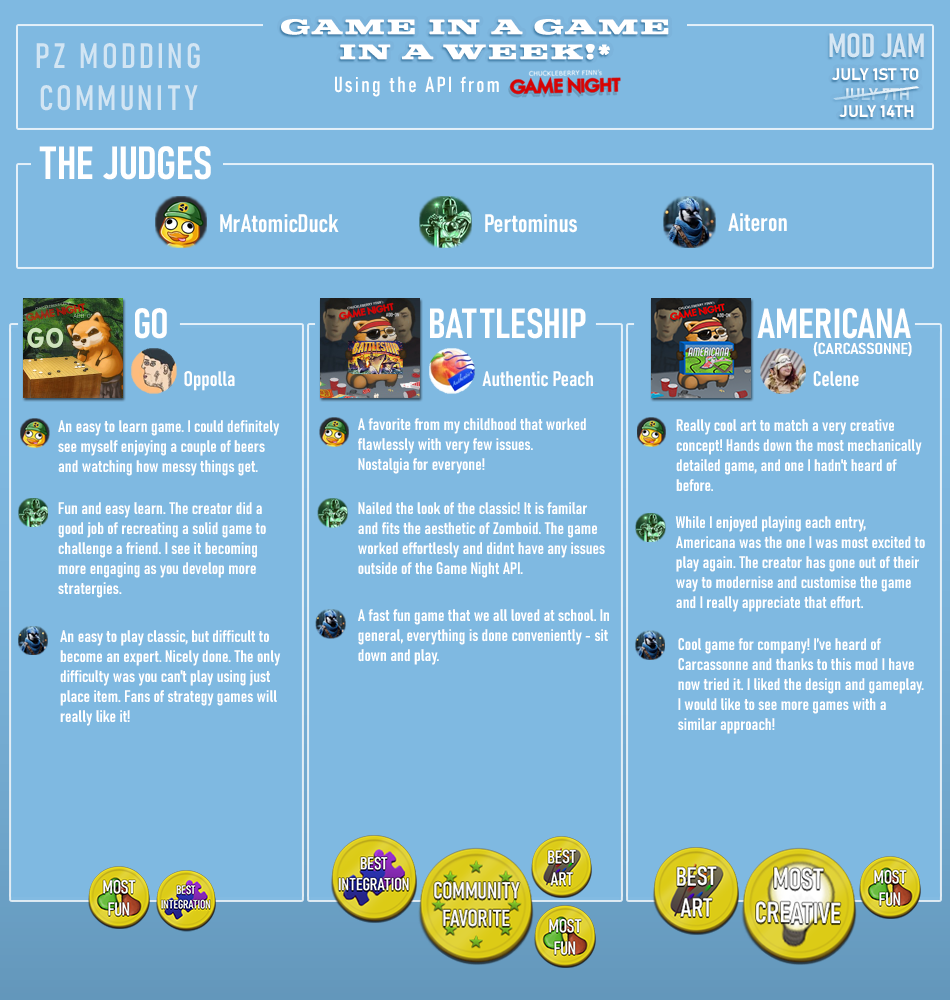
<style>
.page{position:relative;width:950px;height:1000px;background:#7fb9e1}
.page>*{position:absolute;margin:0}
.t1{font:20.8px "ColtSoft-Bold";letter-spacing:0.1em;color:#ffffff;font-weight:bold}
.t2{font:33.2px "Bahnschrift-SemiBoldCondensed";color:#d6e7f4;font-weight:bold}
.t3{font:34.7px "Bahnschrift-Condensed";letter-spacing:0.1em;color:#d2e5f3;font-weight:bold}
.t4{font:21.3px "Bahnschrift-Condensed";letter-spacing:0.1em;color:#ffffff;font-weight:bold}
.t5{font:16.6px "Bahnschrift-Bold";color:#ffffff;font-weight:bold}
.t6{font:85.5px "Bahnschrift-Bold";font-weight:bold;scale:0.28 1}
.t7{font:45.8px "Bahnschrift-SemiBoldCondensed";color:#ffffff;font-weight:bold}
.t8{font:25px "Bahnschrift-SemiBoldCondensed";color:#ffffff;font-weight:bold}
.t9{font:41.7px "Bahnschrift-SemiBoldCondensed";color:#ffffff;font-weight:bold}
.t10{font:15.6px "Bahnschrift-SemiBoldCondensed";color:#ffffff;font-weight:bold;scale:1.27 1}
.t11{font:20.8px "Bahnschrift-SemiBoldCondensed";color:#ffffff;font-weight:bold}
.t12{font:16.7px "Bahnschrift-SemiBoldCondensed";color:#ffffff;font-weight:bold}
</style>
<div class="page">
<p class="t1" style="left:281px;top:19px;width:388px;height:41px;text-align:center">gAMe in a game <br>in a week!*</p>
<p class="t2" style="left:829px;top:33px;width:95px;height:25px">MOD JAM</p>
<p class="t3" style="left:36px;top:43px;width:164px;height:68px;text-align:center">PZ MODDING COMMUNITY</p>
<p class="t4" style="left:335px;top:76px;width:164px;height:21px">Using the API from</p>
<p class="t5" style="left:832px;top:68px;width:87px;height:32px;text-align:center">JULY 1ST TO <br>JULY 7TH</p>
<p class="t6" style="left:833px;top:86px;width:87px;height:14px;rotate:37deg">/</p>
<p class="t5" style="left:839px;top:105px;width:75px;height:12px">JULY 14TH</p>
<p class="t7" style="left:39px;top:146px;width:172px;height:34px">THE JUDGES</p>
<p class="t8" style="left:220px;top:214px;width:119px;height:19px">MrAtomicDuck</p>
<p class="t8" style="left:485px;top:214px;width:92px;height:19px">Pertominus</p>
<p class="t8" style="left:728px;top:213px;width:59px;height:19px">Aiteron</p>
<p class="t9" style="left:135px;top:308px;width:32px;height:31px">GO</p>
<p class="t9" style="left:430px;top:308px;width:156px;height:31px">BATTLESHIP</p>
<p class="t9" style="left:757px;top:308px;width:154px;height:31px">AMERICANA</p>
<p class="t10" style="left:813px;top:341px;width:99px;height:16px">(CARCASSONNE)</p>
<p class="t11" style="left:184px;top:371px;width:51px;height:20px">Oppolla</p>
<p class="t11" style="left:482px;top:371px;width:111px;height:16px">Authentic Peach</p>
<p class="t11" style="left:813px;top:371px;width:46px;height:16px">Celene</p>
<p class="t12" style="left:58px;top:420px;width:222px;height:56px">An easy to learn game. I could definitely see myself enjoying a couple of beers and watching how messy things get.</p>
<p class="t12" style="left:358px;top:418px;width:228px;height:56px">A favorite from my childhood that worked flawlessly with very few issues. <br>Nostalgia for everyone!</p>
<p class="t12" style="left:676px;top:419px;width:246px;height:72px">Really cool art to match a very creative concept! Hands down the most mechanically detailed game, and one I hadn't heard of before.</p>
<p class="t12" style="left:58px;top:502px;width:208px;height:96px">Fun and easy learn. The creator did a good job of recreating a solid game to challenge a friend. I see it becoming more engaging as you develop more stratergies.</p>
<p class="t12" style="left:358px;top:502px;width:247px;height:76px">Nailed the look of the classic! It is familar and fits the aesthetic of Zomboid. The game worked effortlesly and didnt have any issues outside of the Game Night API.</p>
<p class="t12" style="left:675px;top:516px;width:250px;height:96px">While I enjoyed playing each entry, Americana was the one I was most excited to play again. The creator has gone out of their way to modernise and customise the game and I really appreciate that effort.</p>
<p class="t12" style="left:358px;top:609px;width:251px;height:56px">A fast fun game that we all loved at school. In general, everything is done conveniently - sit down and play.</p>
<p class="t12" style="left:60px;top:630px;width:221px;height:96px">An easy to play classic, but difficult to become an expert. Nicely done. The only difficulty was you can't play using just place item. Fans of strategy games will really like it!</p>
<p class="t12" style="left:678px;top:638px;width:246px;height:96px">Cool game for company! I’ve heard of Carcassonne and thanks to this mod I have now tried it. I liked the design and gameplay. I would like to see more games with a similar approach!</p>
</div>
